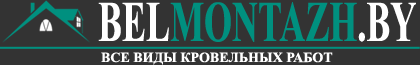
<style>
.page{position:relative;width:420px;height:65px;background:#333333}
.page>*{position:absolute;margin:0}
.t1{font:57.6px "TimesNewRomanPS-BoldMT";color:#00907f;text-transform:uppercase;scale:0.62 1}
.t2{font:57.6px "TimesNewRomanPS-BoldMT";color:#ffffff;text-transform:uppercase;scale:0.62 1}
.t3{font:14px "TimesNewRomanPS-BoldMT";color:#ffffff;text-transform:uppercase}
</style>
<div class="page">
<p class="t1" style="left:98px;top:2px;width:318px;height:40px"><span class="t2">Bel</span>Montazh<span class="t2">.by</span></p>
<p class="t3" style="left:101px;top:52px;width:232px;height:13px">все виды кровельных работ</p>
</div>
